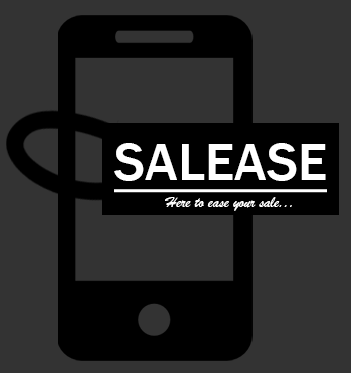
<style>
.page{position:relative;width:351px;height:373px;background:#333333}
.page>*{position:absolute;margin:0}
.t1{font:54.3px "FranklinGothic-Medium";color:#ffffff;text-decoration:underline}
.t2{font:15.9px "BrushScriptMT";color:#ffffff}
</style>
<div class="page">
<p class="t1" style="left:114px;top:143px;width:213px;height:50px">SALEASE</p>
<p class="t2" style="left:165px;top:197px;width:127px;height:14px">Here to ease your sale...</p>
</div>
